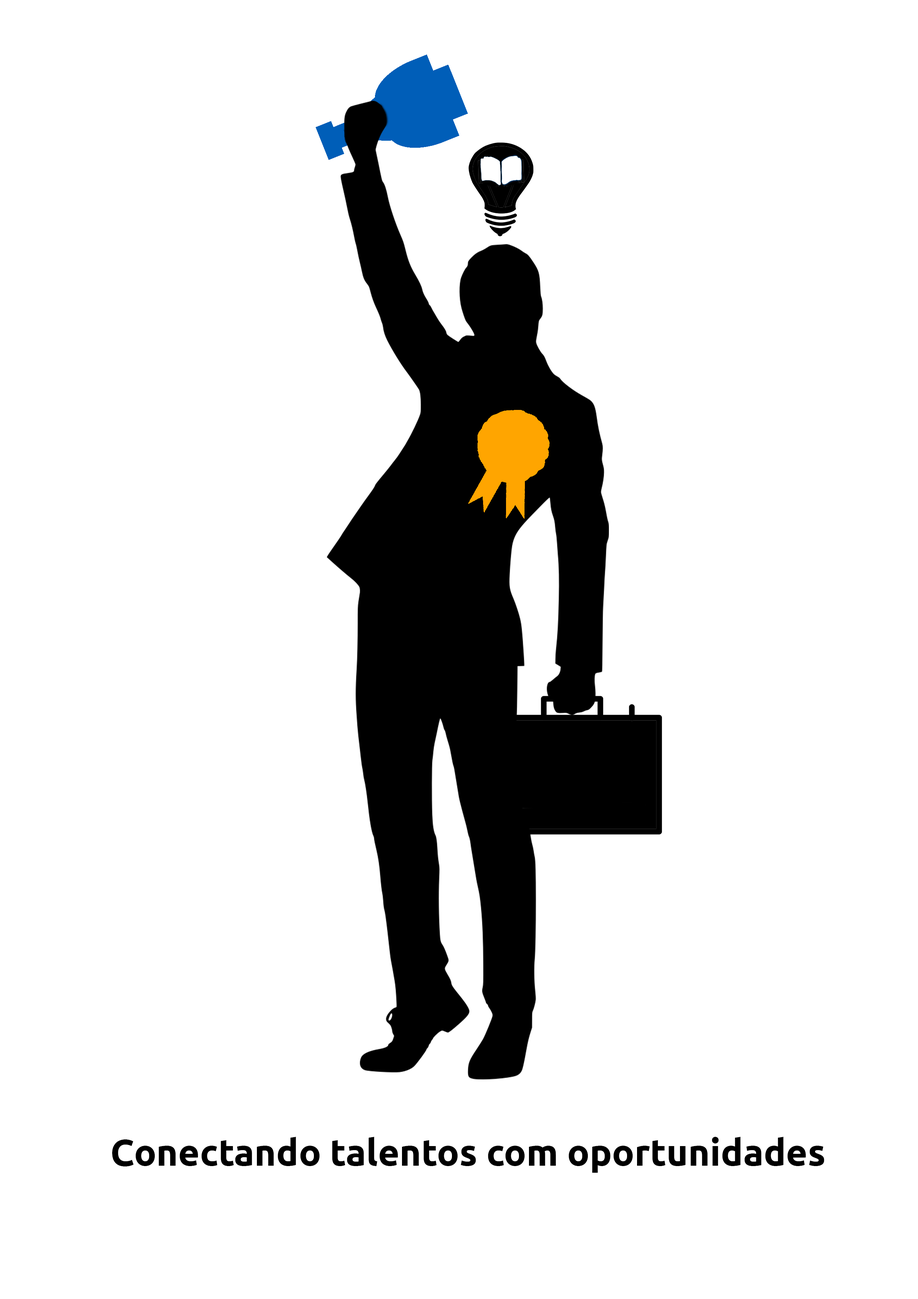
<style>
.page{position:relative;width:918px;height:1299px;background:#ffffff}
.page>*{position:absolute;margin:0}
.t1{font:37px "Ubuntu-Bold";color:#000000}
</style>
<div class="page">
<p class="t1" style="left:112px;top:1137px;width:712px;height:35px">Conectando talentos com oportunidades</p>
</div>
